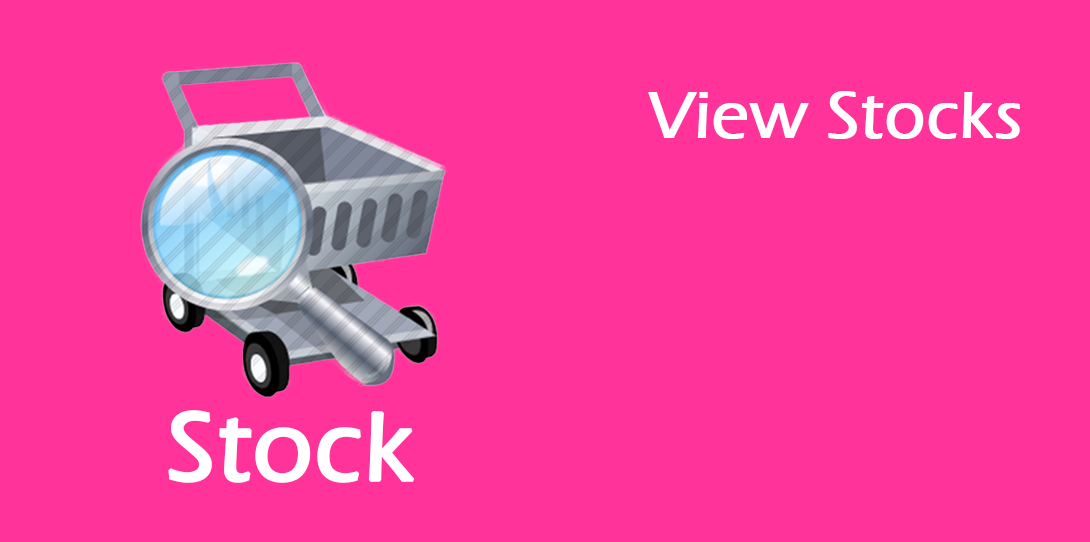
<style>
.page{position:relative;width:1090px;height:542px;background:#ff3399}
.page>*{position:absolute;margin:0}
.t1{font:67.9px "ErasITC-Medium";color:#ffffff;font-weight:bold}
.t2{font:101.2px "ErasITC-Medium";color:#ffffff;font-weight:bold}
</style>
<div class="page">
<p class="t1" style="left:648px;top:91px;width:372px;height:48px">View Stocks</p>
<p class="t2" style="left:168px;top:410px;width:247px;height:73px">Stock</p>
</div>
